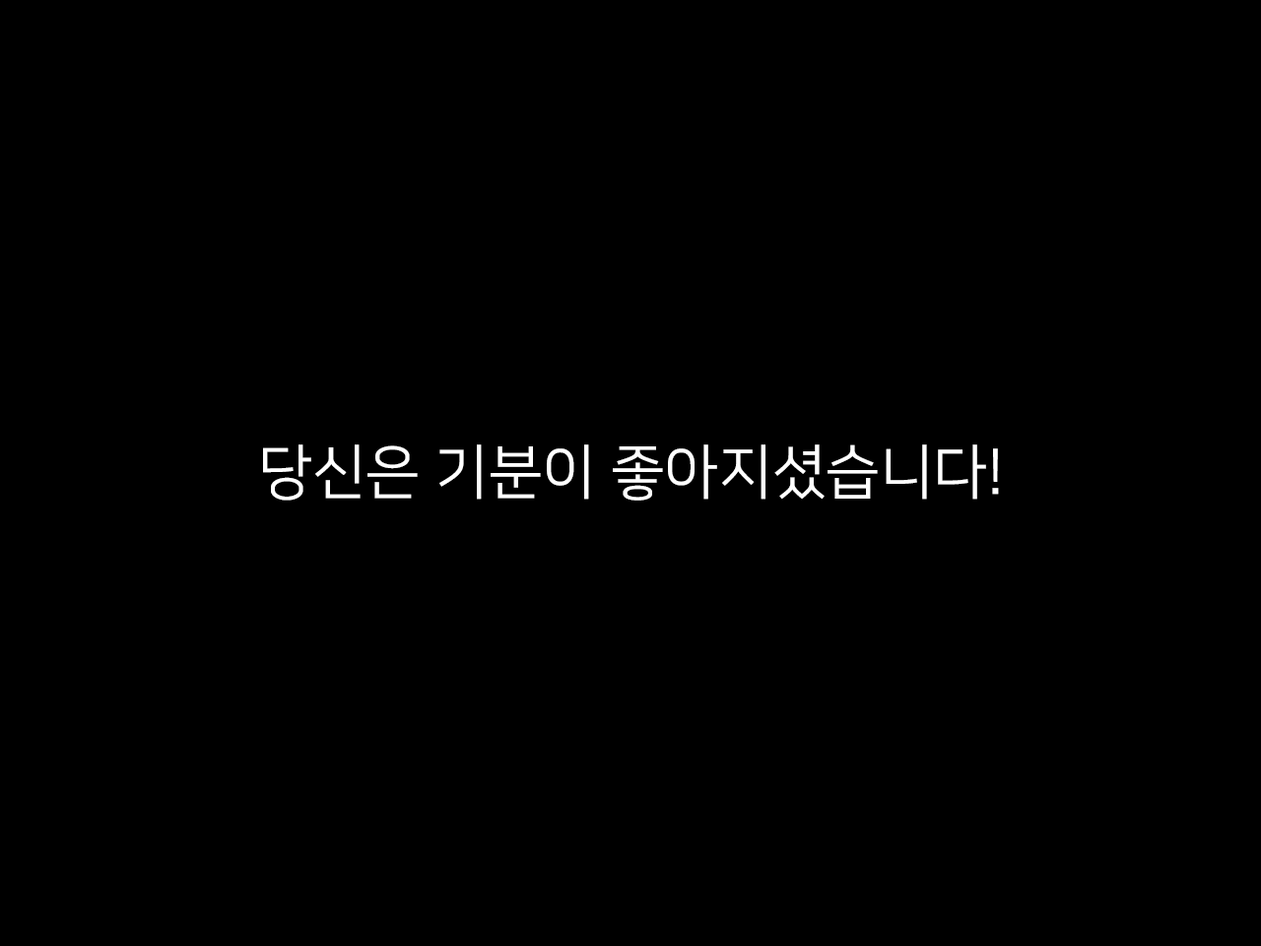
<style>
.page{position:relative;width:1261px;height:946px;background:#000000}
.page>*{position:absolute;margin:0}
.t1{font:59.1px "NanumSquareR";color:#ffffff}
</style>
<div class="page">
<p class="t1" style="left:263px;top:444px;width:736px;height:56px">당신은 기분이 좋아지셨습니다!</p>
</div>
